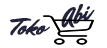
<style>
.page{position:relative;width:107px;height:48px;background:#ffffff}
.page>*{position:absolute;margin:0}
.t1{font:24.3px "MrDafoe-Regular";color:#22223b;font-weight:bold}
.t2{font:24.2px "MrDafoe-Regular";color:#22223b;font-weight:bold}
</style>
<div class="page">
<p class="t1" style="left:61px;top:4px;width:34px;height:24px;rotate:-16deg">Abi</p>
<p class="t2" style="left:10px;top:18px;width:40px;height:18px">Toko</p>
</div>
